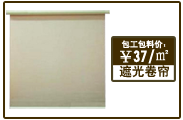
<style>
.page{position:relative;width:183px;height:120px;background:#ffffff}
.page>*{position:absolute;margin:0}
.t1{font:8.2px "HeitiCSEG";color:#fffefe}
.t2{font:14.5px "HeitiCSEG";color:#ffffff}
.t3{font:14.5px "SimSun";color:#ffffff}
.t4{font:12.6px "HeitiCSEG";color:#412c00}
</style>
<div class="page">
<p class="t1" style="left:121px;top:40px;width:45px;height:9px">包工包料价：</p>
<p class="t2" style="left:120px;top:49px;width:49px;height:15px">￥37/<span class="t3">㎡</span></p>
<p class="t4" style="left:119px;top:65px;width:50px;height:13px">遮光卷帘</p>
</div>
